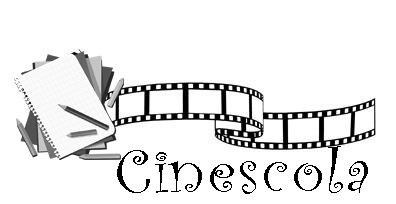
<style>
.page{position:relative;width:396px;height:204px;background:#ffffff}
.page>*{position:absolute;margin:0}
.t1{font:61.9px "CurlzMT";letter-spacing:0.03em;color:#000000;scale:1.11 1}
</style>
<div class="page">
<p class="t1" style="left:117px;top:146px;width:251px;height:48px">Cinescola</p>
</div>
